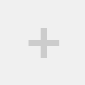
<style>
.page{position:relative;width:85px;height:85px;background:#f0f0f0}
.page>*{position:absolute;margin:0}
.t1{font:60px "MicrosoftYaHei";letter-spacing:0.15em;color:#cccccc}
</style>
<div class="page">
<p class="t1" style="left:28px;top:28px;width:32px;height:30px">+</p>
</div>
